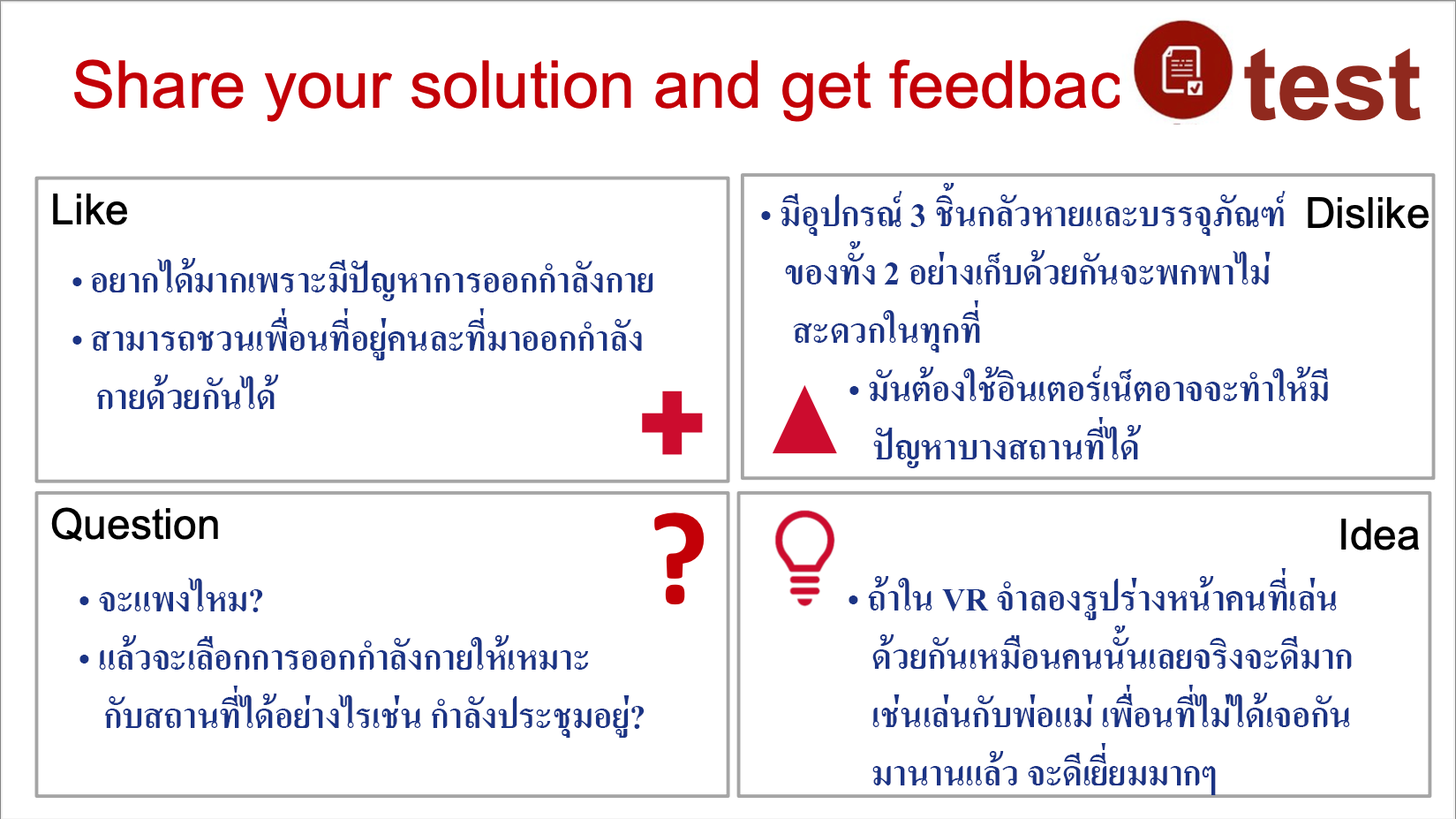
<style>
.page{position:relative;width:1456px;height:819px;background:#ffffff}
.page>*{position:absolute;margin:0}
.t1{font:48.6px "AngsanaUPC-Bold";color:#1b3485}
</style>
<div class="page">
<p class="t1" style="left:761px;top:183px;width:567px;height:285px">• มีอุปกรณ์ 3 ชิ้นกลัวหายและบรรจุภัณฑ์<br>   ของทั้ง 2 อย่างเก็บด้วยกันจะพกพาไม่<br>    สะดวกในทุกที่<br>           • มันต้องใช้อินเตอร์เน็ตอาจจะทำให้มี<br>              ปัญหาบางสถานที่ได้</p>
<p class="t1" style="left:72px;top:258px;width:582px;height:151px">• อยากได้มากเพราะมีปัญหาการออกกำลังกาย<br>• สามารถชวนเพื่อนที่อยู่คนละที่มาออกกำลัง<br>   กายด้วยกันได้</p>
<p class="t1" style="left:849px;top:568px;width:503px;height:227px">• ถ้าใน VR จำลองรูปร่างหน้าคนที่เล่น<br>   ด้วยกันเหมือนคนนั้นเลยจริงจะดีมาก <br>   เช่นเล่นกับพ่อแม่ เพื่อนที่ไม่ได้เจอกัน<br>   มานานแล้ว จะดีเยี่ยมมากๆ</p>
<p class="t1" style="left:79px;top:578px;width:566px;height:159px">• จะแพงไหม?<br>• แล้วจะเลือกการออกกำลังกายให้เหมาะ<br>   กับสถานที่ได้อย่างไรเช่น กำลังประชุมอยู่?</p>
</div>
